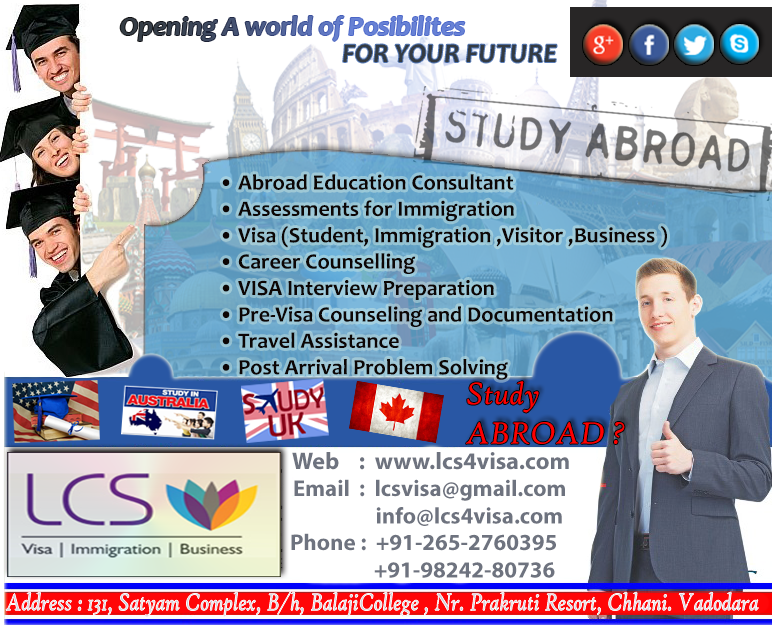
<style>
.page{position:relative;width:772px;height:625px}
.page>*{position:absolute;margin:0}
.t1{font:27.4px "Candara-BoldItalic"}
.t2{font:27.4px "Candara-BoldItalic";color:#343b42}
.t3{font:22px "Candara-Bold";color:#0d0605}
.t4{font:32.8px "HighTowerText-Italic";color:#ff0000}
.t5{font:24px "MyriadPro-Bold";color:#6e737f}
.t6{font:23px "MyriadPro-Bold";color:#6e737f}
.t7{font:25.8px "HighTowerText-Italic";color:#c8cfdd;scale:0.83 1}
</style>
<div class="page">
<p class="t1" style="left:120px;top:16px;width:345px;height:25px">Opening A world of Posibilites</p>
<p class="t2" style="left:343px;top:44px;width:214px;height:19px">FOR YOUR FUTURE</p>
<p class="t3" style="left:222px;top:174px;width:445px;height:206px">• Abroad Education Consultant                                 <br> • Assessments for Immigration <br> • Visa (Student, Immigration ,Visitor ,Business )       <br> • Career Counselling      <br> • VISA Interview Preparation    <br> • Pre-Visa Counseling and Documentation                 <br> • Travel Assistance  <br> • Post Arrival Problem Solving</p>
<p class="t4" style="left:466px;top:381px;width:159px;height:63px">Study <br>ABROAD ?</p>
<p class="t5" style="left:292px;top:452px;width:277px;height:18px">Web    :  www.lcs4visa.com</p>
<p class="t6" style="left:294px;top:479px;width:271px;height:47px">Email  :  lcsvisa@gmail.com <br>           info@lcs4visa.com</p>
<p class="t6" style="left:291px;top:533px;width:265px;height:45px">Phone :  +91-265-2760395<br>                  +91-98242-80736</p>
<p class="t7" style="left:6px;top:591px;width:753px;height:26px">Address : 131, Satyam Complex, B/h, BalajiCollege , Nr. Prakruti Resort, Chhani. Vadodara</p>
</div>
